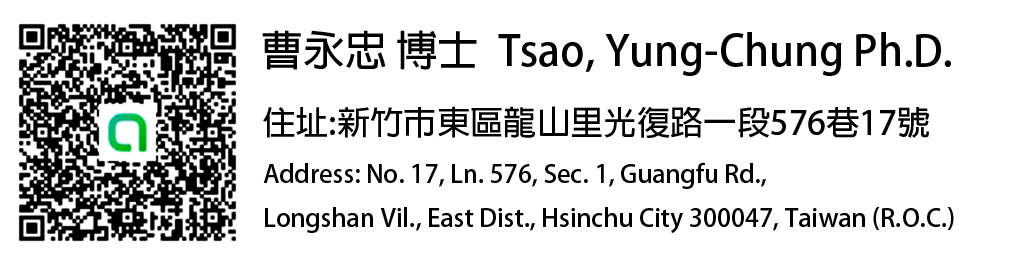
<style>
.page{position:relative;width:1024px;height:258px;background:#ffffff}
.page>*{position:absolute;margin:0}
.t1{font:41.7px "AdobeFanHeitiStd-Bold";color:#000000}
.t2{font:33.3px "AdobeFanHeitiStd-Bold";color:#000000}
.t3{font:25px "AdobeFanHeitiStd-Bold";color:#000000}
</style>
<div class="page">
<p class="t1" style="left:262px;top:30px;width:689px;height:46px">曹永忠 博士  Tsao, Yung-Chung Ph.D.</p>
<p class="t2" style="left:263px;top:106px;width:666px;height:32px">住址:新竹市東區龍山里光復路一段576巷17號</p>
<p class="t3" style="left:263px;top:162px;width:691px;height:71px">Address: No. 17, Ln. 576, Sec. 1, Guangfu Rd., <br>Longshan Vil., East Dist., Hsinchu City 300047, Taiwan (R.O.C.)</p>
</div>
